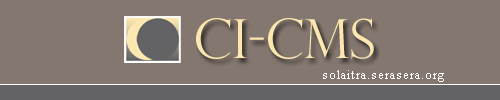
<style>
.page{position:relative;width:500px;height:100px;background:#84776f}
.page>*{position:absolute;margin:0}
.t1{font:54px "PerpetuaTitlingMT-Light";color:#fce7b0}
.t2{font:13px "TimesNewRomanPSMT";letter-spacing:0.06em;color:#ffffff}
</style>
<div class="page">
<p class="t1" style="left:193px;top:12px;width:182px;height:58px">CI-CMS</p>
<p class="t2" style="left:322px;top:68px;width:123px;height:15px">solaitra.serasera.org</p>
</div>
